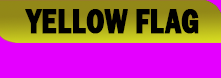
<style>
.page{position:relative;width:221px;height:78px;background:#e400ff}
.page>*{position:absolute;margin:0}
.t1{font:35.6px "FranklinGothic-Heavy";color:#000000;font-weight:bold;scale:0.72 1}
</style>
<div class="page">
<p class="t1" style="left:25px;top:9px;width:174px;height:25px">YELLOW FLAG</p>
</div>
